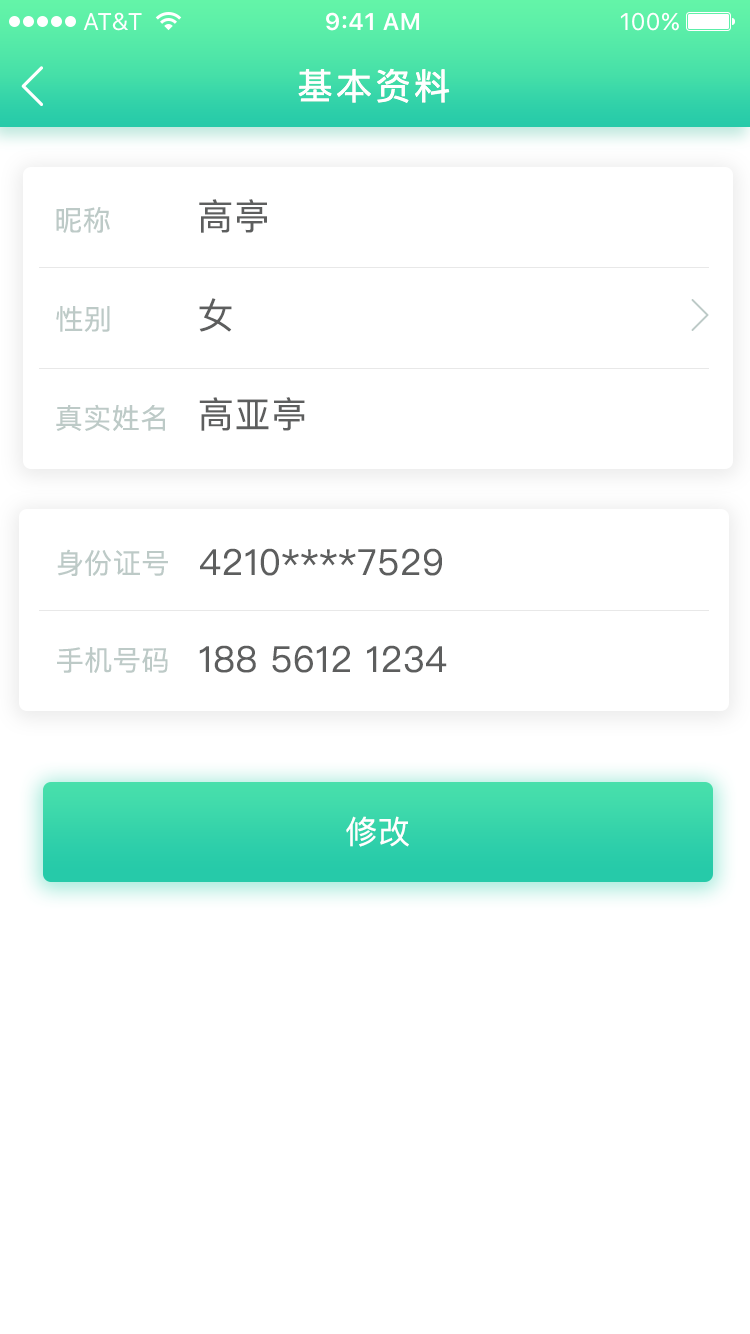
<style>
.page{position:relative;width:750px;height:1334px;background:#ffffff}
.page>*{position:absolute;margin:0}
.t1{font:36px "PingFangSC-Regular";letter-spacing:0.08em;color:#ffffff}
.t2{font:28px "PingFangSC-Regular";letter-spacing:0.02em;color:#bdcac7}
.t3{font:36px "PingFangSC-Regular";letter-spacing:0.02em;color:#5d5e5e}
.t4{font:32px "PingFangSC-Regular";letter-spacing:0.02em;color:#ffffff}
</style>
<div class="page">
<p class="t1" style="left:298px;top:68px;width:152px;height:35px">基本资料</p>
<p class="t2" style="left:56px;top:207px;width:54px;height:26px">昵称</p>
<p class="t3" style="left:199px;top:199px;width:68px;height:34px">高亭</p>
<p class="t3" style="left:199px;top:298px;width:33px;height:34px">女</p>
<p class="t2" style="left:56px;top:306px;width:54px;height:26px">性别</p>
<p class="t3" style="left:199px;top:397px;width:106px;height:34px">高亚亭</p>
<p class="t2" style="left:56px;top:404px;width:109px;height:27px">真实姓名</p>
<p class="t2" style="left:57px;top:549px;width:111px;height:27px">身份证号</p>
<p class="t3" style="left:200px;top:548px;width:242px;height:28px">4210****7529</p>
<p class="t2" style="left:57px;top:647px;width:111px;height:26px">手机号码</p>
<p class="t3" style="left:199px;top:645px;width:248px;height:28px">188 5612 1234</p>
<p class="t4" style="left:346px;top:816px;width:63px;height:31px">修改</p>
</div>
